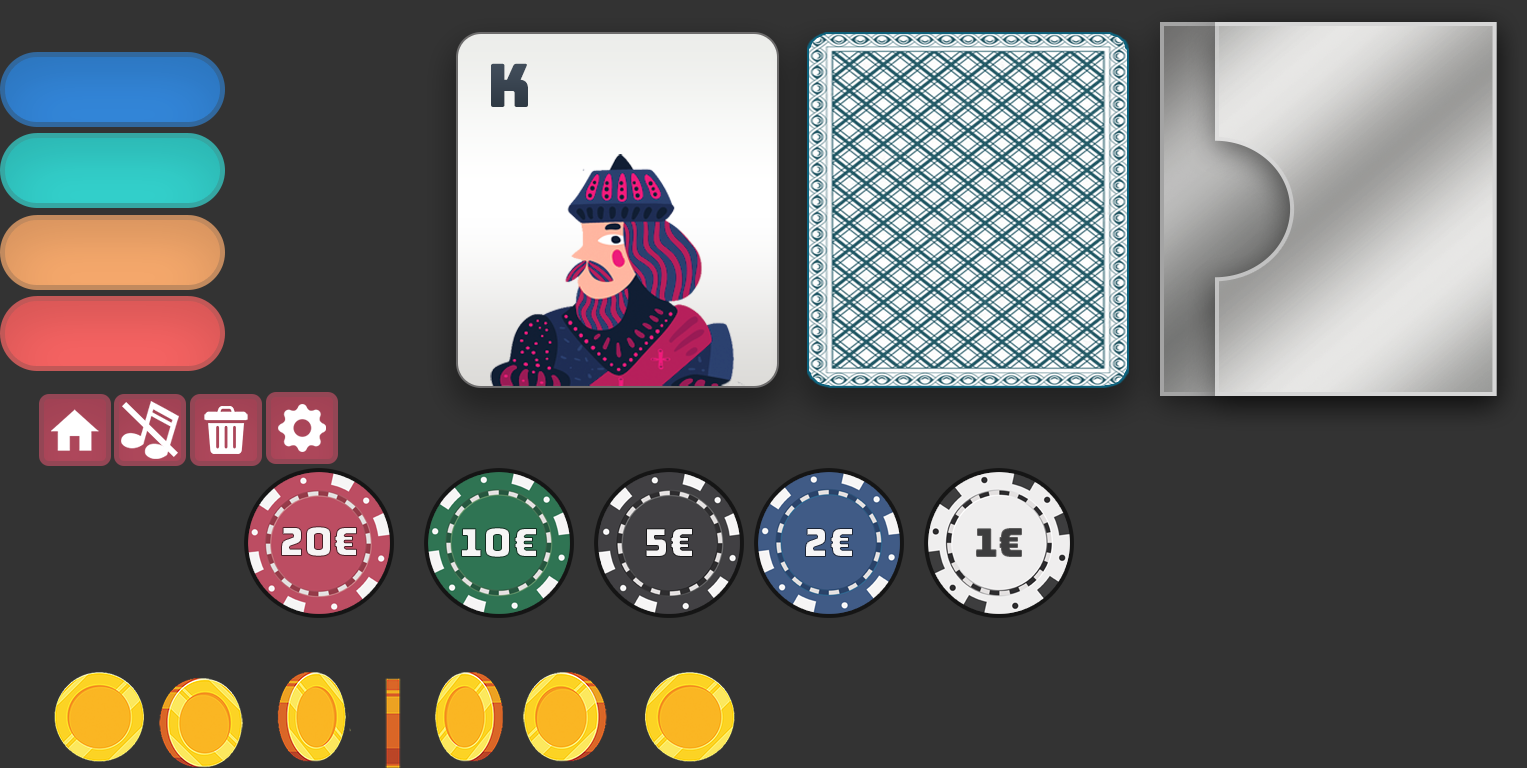
<style>
.page{position:relative;width:1527px;height:768px;background:#333333}
.page>*{position:absolute;margin:0}
.t1{font:60px "Bungee-Regular";color:#38434f}
.t2{font:40px "Bungee-Regular";color:#f6f5f5}
.t3{font:40px "Bungee-Regular";color:#3d3d3e}
</style>
<div class="page">
<p class="t1" style="left:491px;top:63px;width:37px;height:44px">K</p>
<p class="t2" style="left:281px;top:526px;width:76px;height:31px">20€</p>
<p class="t2" style="left:461px;top:527px;width:76px;height:31px">10€</p>
<p class="t2" style="left:645px;top:528px;width:48px;height:29px">5€</p>
<p class="t2" style="left:805px;top:528px;width:48px;height:29px">2€</p>
<p class="t3" style="left:976px;top:528px;width:46px;height:29px">1€</p>
</div>
